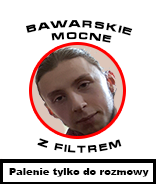
<style>
.page{position:relative;width:156px;height:184px;background:#ffffff}
.page>*{position:absolute;margin:0}
.t1{font:10px "MicraC-Bold";color:#000000}
.t2{font:10px "Arial-Black";color:#000000}
</style>
<div class="page">
<p class="t1" style="left:25px;top:20px;width:108px;height:23px">bawarskie <br>     mocne</p>
<p class="t1" style="left:37px;top:138px;width:85px;height:15px;rotate:-6deg">z filtrem</p>
<p class="t2" style="left:9px;top:168px;width:140px;height:9px">Palenie tylko do rozmowy</p>
</div>
